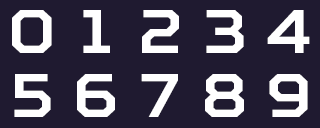
<style>
.page{position:relative;width:320px;height:128px;background:#1f1a30}
.page>*{position:absolute;margin:0}
.t1{font:60px "SquaresBold";letter-spacing:-0.025em;color:#ffffff}
</style>
<div class="page">
<p class="t1" style="left:12px;top:10px;width:40px;height:43px">0</p>
<p class="t1" style="left:83px;top:10px;width:27px;height:43px">1</p>
<p class="t1" style="left:142px;top:10px;width:37px;height:43px">2</p>
<p class="t1" style="left:206px;top:10px;width:38px;height:43px">3</p>
<p class="t1" style="left:267px;top:10px;width:43px;height:43px">4</p>
<p class="t1" style="left:14px;top:74px;width:37px;height:43px">5</p>
<p class="t1" style="left:77px;top:74px;width:38px;height:43px">6</p>
<p class="t1" style="left:141px;top:74px;width:37px;height:43px">7</p>
<p class="t1" style="left:205px;top:74px;width:39px;height:43px">8</p>
<p class="t1" style="left:269px;top:74px;width:39px;height:43px">9</p>
</div>
